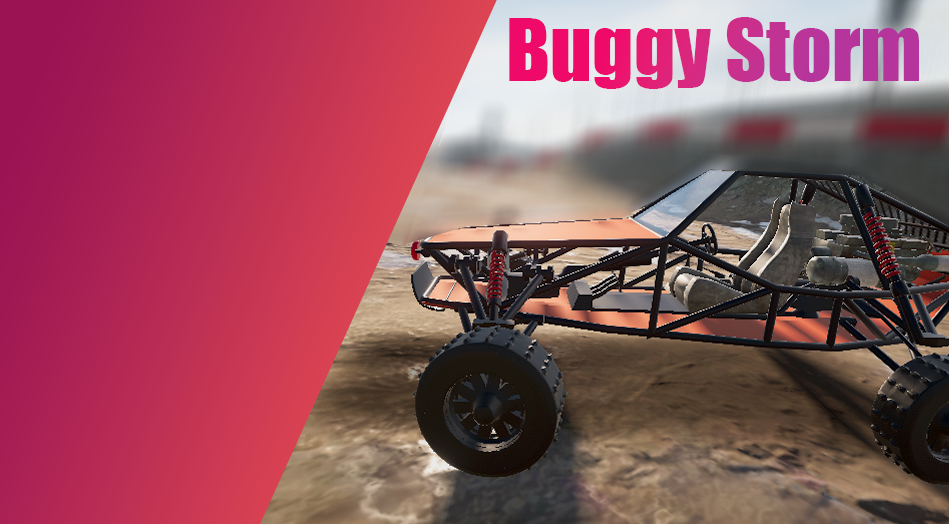
<style>
.page{position:relative;width:949px;height:524px}
.page>*{position:absolute;margin:0}
.t1{font:80px "Impact"}
</style>
<div class="page">
<p class="t1" style="left:509px;top:17px;width:410px;height:72px">Buggy Storm</p>
</div>
